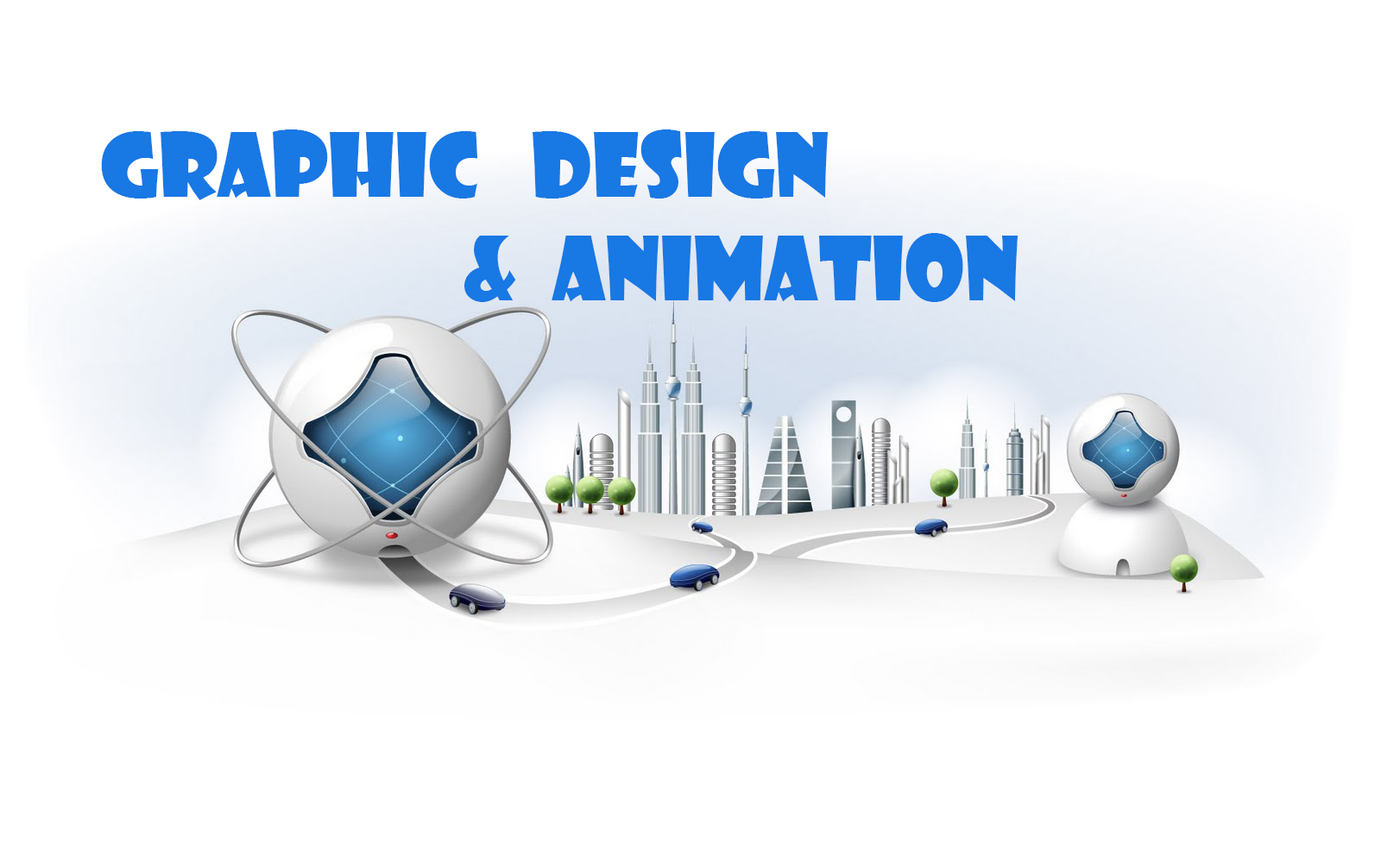
<style>
.page{position:relative;width:1381px;height:863px;background:#ffffff}
.page>*{position:absolute;margin:0}
.t1{font:86.3px "ShowcardGothic-Reg";color:#1878e4}
</style>
<div class="page">
<p class="t1" style="left:101px;top:129px;width:917px;height:173px">graphic   design<br>                     &amp;  animation</p>
</div>
